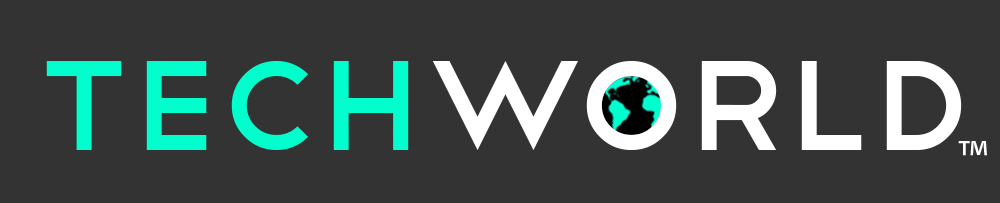
<style>
.page{position:relative;width:1000px;height:203px;background:#333333}
.page>*{position:absolute;margin:0}
.t1{font:166.8px "Telegrafico";color:#ffffff}
.t2{font:166.8px "Telegrafico";color:#00ffcc}
.t3{font:50.1px "MyriadPro-Regular";color:#ffffff}
</style>
<div class="page">
<p class="t1" style="left:46px;top:61px;width:916px;height:89px"><span class="t2">Tech</span>world</p>
<p class="t3" style="left:958px;top:141px;width:29px;height:15px">™</p>
</div>
